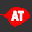
<style>
.page{position:relative;width:32px;height:32px;background:#333333}
.page>*{position:absolute;margin:0}
.t1{font:14px "Norwester-Regular";color:#ffffff}
</style>
<div class="page">
<p class="t1" style="left:11px;top:10px;width:13px;height:11px">at</p>
</div>
